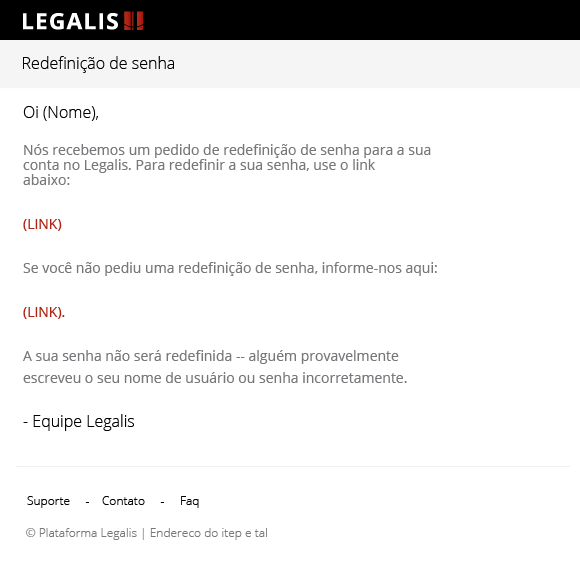
<style>
.page{position:relative;width:580px;height:565px;background:#ffffff}
.page>*{position:absolute;margin:0}
.t1{font:16px "OpenSans-Light";color:#000000}
.t2{font:14px/15px "OpenSans";color:#77787b}
.t3{font:16px/22px "OpenSans-Light";color:#000000}
.t4{font:14px/22px "OpenSans";color:#ad2414}
.t5{font:14px/22px "OpenSans";color:#77787b}
.t6{font:12px "OpenSans-Light";color:#000000}
.t7{font:12px "OpenSans-Light";color:#77787b}
</style>
<div class="page">
<p class="t1" style="left:23px;top:56px;width:151px;height:17px">Redefinição de senha</p>
<p class="t2" style="left:23px;top:106px;width:414px;height:325px"><span class="t3">Oi (Nome),<br><br></span>Nós recebemos um pedido de redefinição de senha para a sua <br>conta no Legalis. Para redefinir a sua senha, use o link <br>abaixo:<br><br><span class="t4">(LINK)<br><br></span><span class="t5">Se você não pediu uma redefinição de senha, informe-nos aqui: <br><br></span><span class="t4">(LINK). <br><br></span><span class="t5">A sua senha não será redefinida -- alguém provavelmente <br>escreveu o seu nome de usuário ou senha incorretamente.<br></span><span class="t3"><br>- Equipe Legalis</span></p>
<p class="t6" style="left:27px;top:496px;width:172px;height:12px">Suporte     -    Contato     -     Faq</p>
<p class="t7" style="left:26px;top:528px;width:241px;height:12px">© Plataforma Legalis | Endereco do itep e tal</p>
</div>
